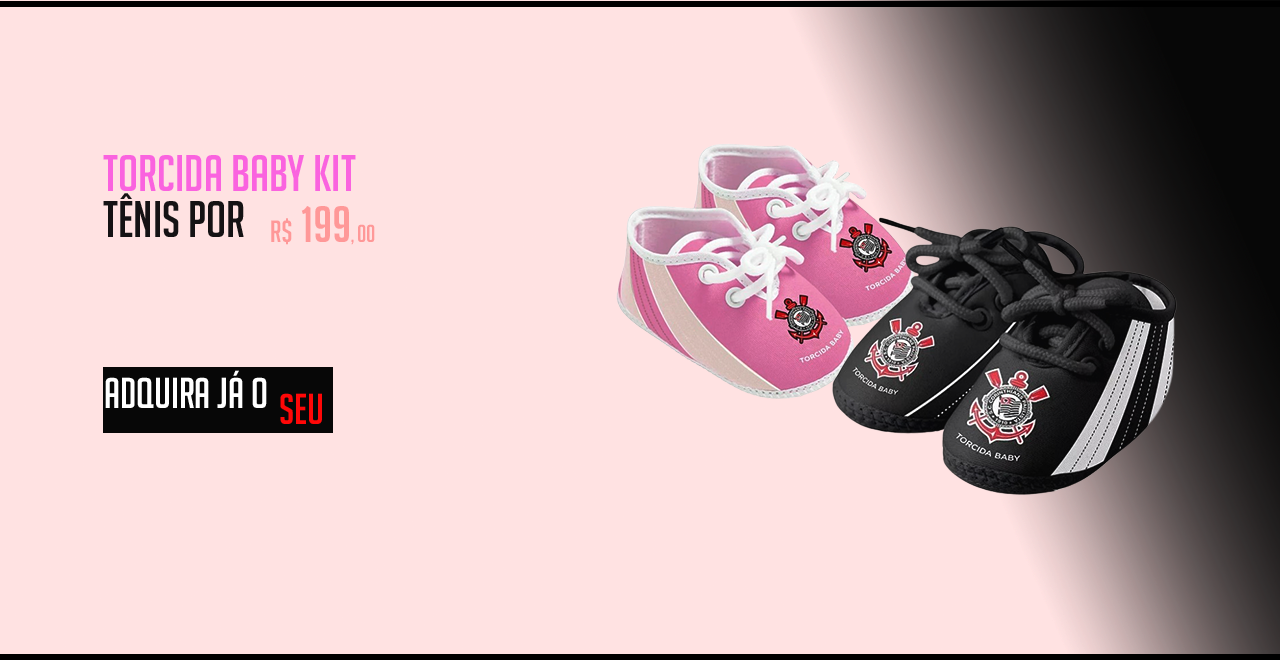
<style>
.page{position:relative;width:1280px;height:660px;background:#ffe2e2}
.page>*{position:absolute;margin:0}
.t1{font:50px "BigNoodleTitling";color:#fb7be7}
.t2{font:50px "BigNoodleTitling";color:#161215}
.t3{font:50px "BigNoodleTitling";color:#ffadad}
.t4{font:30px "BigNoodleTitling";color:#ffadad}
.t5{font:18px "BigNoodleTitling";color:#ffadad}
.t6{font:24px "BigNoodleTitling";color:#ffadad}
.t7{font:42px "BigNoodleTitling";color:#ffffff}
.t8{font:42px "BigNoodleTitling";color:#ff0101}
</style>
<div class="page">
<p class="t1" style="left:103px;top:155px;width:253px;height:36px">torcida baby kit</p>
<p class="t2" style="left:103px;top:193px;width:141px;height:44px">tênis por</p>
<p class="t3" style="left:271px;top:206px;width:104px;height:39px"><span class="t4">R$</span> 199<span class="t5">, </span><span class="t6">00</span></p>
<p class="t7" style="left:105px;top:370px;width:162px;height:38px">adquira já o</p>
<p class="t8" style="left:280px;top:393px;width:42px;height:31px">seu</p>
</div>
